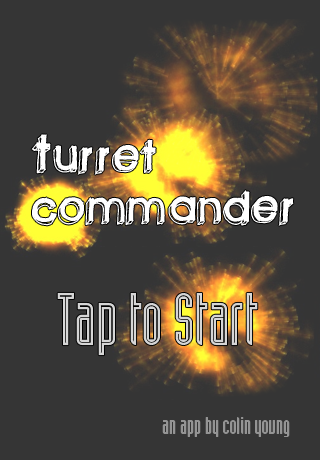
<style>
.page{position:relative;width:320px;height:460px;background:#353535}
.page>*{position:absolute;margin:0}
.t1{font:72px/51px "Greenpiloww";color:#ffffff}
.t2{font:72px "IndustriaLTStd-Inline";color:#d6d6d6}
.t3{font:24px "IndustriaLTStd-Inline";color:#949494}
</style>
<div class="page">
<p class="t1" style="left:31px;top:134px;width:263px;height:92px">Turret<br>commander</p>
<p class="t2" style="left:57px;top:292px;width:201px;height:64px">Tap to Start</p>
<p class="t3" style="left:162px;top:417px;width:128px;height:20px">an app by colin young</p>
</div>
